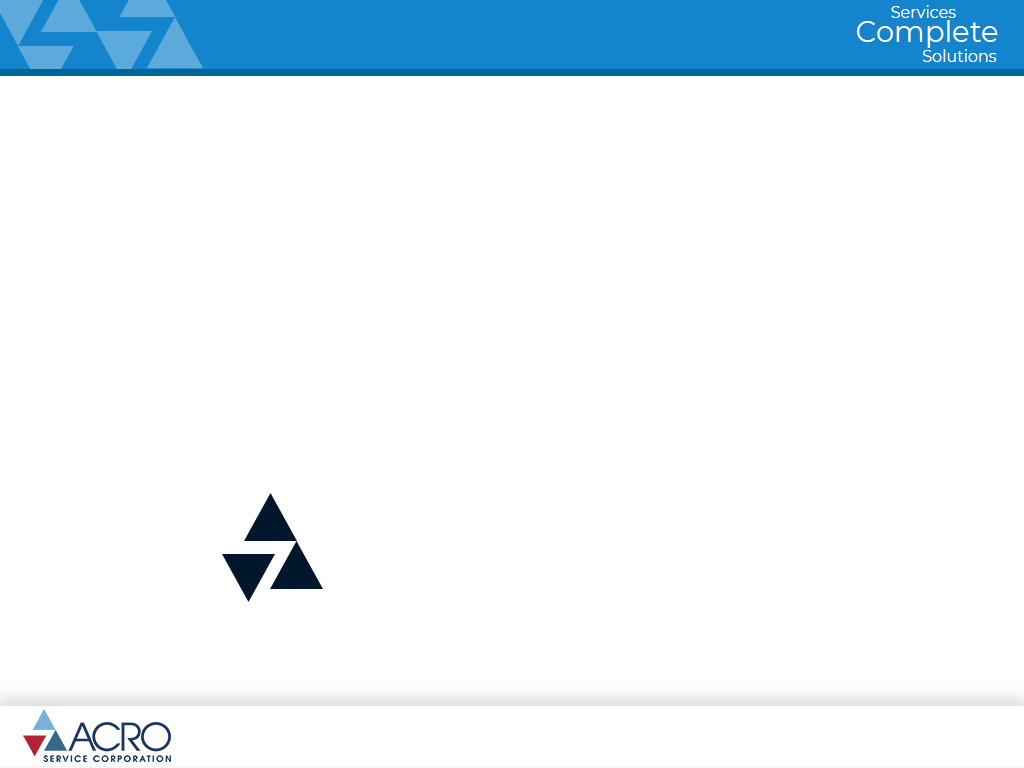
<style>
.page{position:relative;width:1024px;height:768px;background:#ffffff}
.page>*{position:absolute;margin:0}
.t1{font:16px "Montserrat-Regular";color:#ffffff}
.t2{font:29px "Montserrat-Regular";color:#ffffff}
</style>
<div class="page">
<p class="t1" style="left:891px;top:5px;width:65px;height:13px">Services</p>
<p class="t2" style="left:856px;top:20px;width:142px;height:28px">Complete</p>
<p class="t1" style="left:922px;top:49px;width:75px;height:13px">Solutions</p>
</div>
